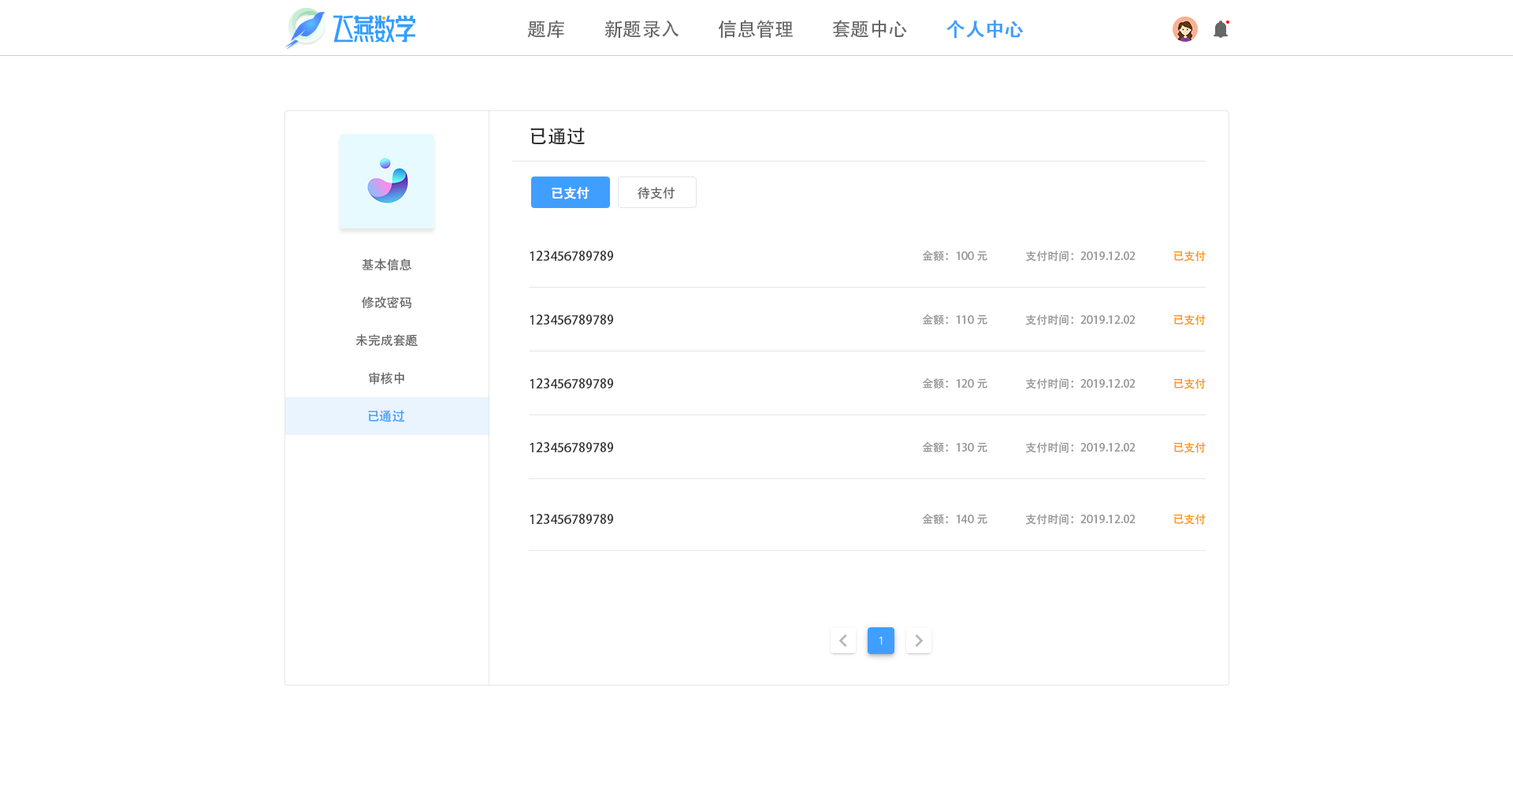
<style>
.page{position:relative;width:1513px;height:788px;background:#ffffff}
.page>*{position:absolute;margin:0}
.t1{font:18.9px "AdobeHeitiStd-Regular";color:#666666}
.t2{font:18.9px "AdobeHeitiStd-Regular";color:#3f9eff;font-weight:bold}
.t3{font:18.9px "AdobeHeitiStd-Regular";color:#333333}
.t4{font:12.6px "AdobeHeitiStd-Regular";color:#fefefe;font-weight:bold}
.t5{font:12.6px "AdobeHeitiStd-Regular";color:#666666}
.t6{font:12.6px "AdobeHeitiStd-Regular";color:#333333}
.t7{font:11px "AdobeHeitiStd-Regular";color:#999999}
.t8{font:11px "AdobeHeitiStd-Regular";color:#ff9814}
.t9{font:12.6px "AdobeHeitiStd-Regular";color:#409eff}
</style>
<div class="page">
<p class="t1" style="left:527px;top:20px;width:37px;height:18px">题库</p>
<p class="t1" style="left:604px;top:20px;width:75px;height:18px">新题录入</p>
<p class="t1" style="left:718px;top:20px;width:75px;height:19px">信息管理</p>
<p class="t1" style="left:833px;top:20px;width:74px;height:18px">套题中心</p>
<p class="t2" style="left:946px;top:20px;width:78px;height:19px">个人中心</p>
<p class="t3" style="left:530px;top:128px;width:55px;height:17px">已通过</p>
<p class="t4" style="left:552px;top:187px;width:37px;height:12px">已支付</p>
<p class="t5" style="left:638px;top:187px;width:37px;height:12px">待支付</p>
<p class="t6" style="left:530px;top:251px;width:84px;height:10px">123456789789</p>
<p class="t7" style="left:922px;top:251px;width:65px;height:10px">金额：100元</p>
<p class="t7" style="left:1025px;top:251px;width:111px;height:11px">支付时间：2019.12.02</p>
<p class="t8" style="left:1173px;top:251px;width:33px;height:11px">已支付</p>
<p class="t5" style="left:362px;top:258px;width:50px;height:13px">基本信息</p>
<p class="t5" style="left:362px;top:296px;width:49px;height:13px">修改密码</p>
<p class="t6" style="left:530px;top:314px;width:84px;height:11px">123456789789</p>
<p class="t7" style="left:922px;top:314px;width:65px;height:11px">金额：110元</p>
<p class="t7" style="left:1025px;top:314px;width:111px;height:11px">支付时间：2019.12.02</p>
<p class="t8" style="left:1173px;top:314px;width:33px;height:11px">已支付</p>
<p class="t5" style="left:355px;top:334px;width:63px;height:13px">未完成套题</p>
<p class="t5" style="left:369px;top:372px;width:35px;height:13px">审核中</p>
<p class="t6" style="left:530px;top:378px;width:84px;height:11px">123456789789</p>
<p class="t7" style="left:922px;top:378px;width:65px;height:11px">金额：120元</p>
<p class="t7" style="left:1025px;top:378px;width:111px;height:11px">支付时间：2019.12.02</p>
<p class="t8" style="left:1173px;top:378px;width:33px;height:11px">已支付</p>
<p class="t9" style="left:368px;top:410px;width:37px;height:12px">已通过</p>
<p class="t6" style="left:530px;top:442px;width:84px;height:10px">123456789789</p>
<p class="t7" style="left:922px;top:442px;width:65px;height:10px">金额：130元</p>
<p class="t7" style="left:1025px;top:442px;width:111px;height:11px">支付时间：2019.12.02</p>
<p class="t8" style="left:1173px;top:442px;width:33px;height:11px">已支付</p>
<p class="t6" style="left:530px;top:514px;width:84px;height:10px">123456789789</p>
<p class="t7" style="left:922px;top:514px;width:65px;height:10px">金额：140元</p>
<p class="t7" style="left:1025px;top:514px;width:111px;height:11px">支付时间：2019.12.02</p>
<p class="t8" style="left:1173px;top:514px;width:33px;height:11px">已支付</p>
</div>
